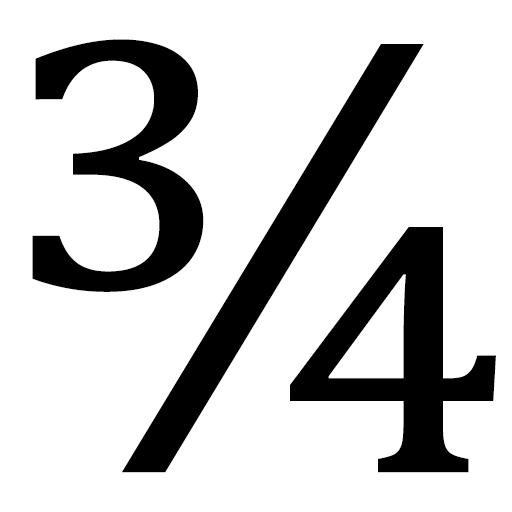
<style>
.page{position:relative;width:512px;height:512px;background:#ffffff}
.page>*{position:absolute;margin:0}
.t1{font:600px "Cambria";color:#000000}
</style>
<div class="page">
<p class="t1" style="left:32px;top:39px;width:464px;height:434px">3/4</p>
</div>
